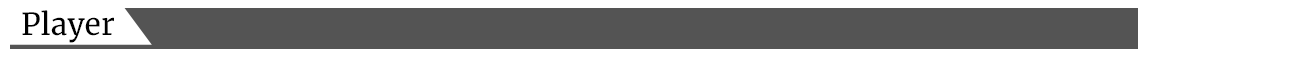
<style>
.page{position:relative;width:1300px;height:77px;background:#ffffff}
.page>*{position:absolute;margin:0}
.t1{font:30px "Merriweather-Regular";color:#000000}
</style>
<div class="page">
<p class="t1" style="left:22px;top:10px;width:92px;height:33px">Player</p>
</div>
